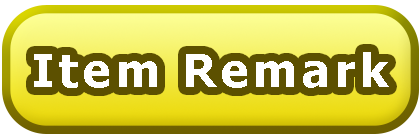
<style>
.page{position:relative;width:420px;height:135px}
.page>*{position:absolute;margin:0}
.t1{font:46.3px "Tahoma-Bold";letter-spacing:0.1em;color:#ffffff}
</style>
<div class="page">
<p class="t1" style="left:34px;top:52px;width:355px;height:36px">Item Remark</p>
</div>
